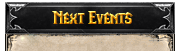
<style>
.page{position:relative;width:180px;height:51px}
.page>*{position:absolute;margin:0}
.t1{font:18.7px "LifeCraft"}
</style>
<div class="page">
<p class="t1" style="left:52px;top:11px;width:81px;height:13px">Next Events</p>
</div>
